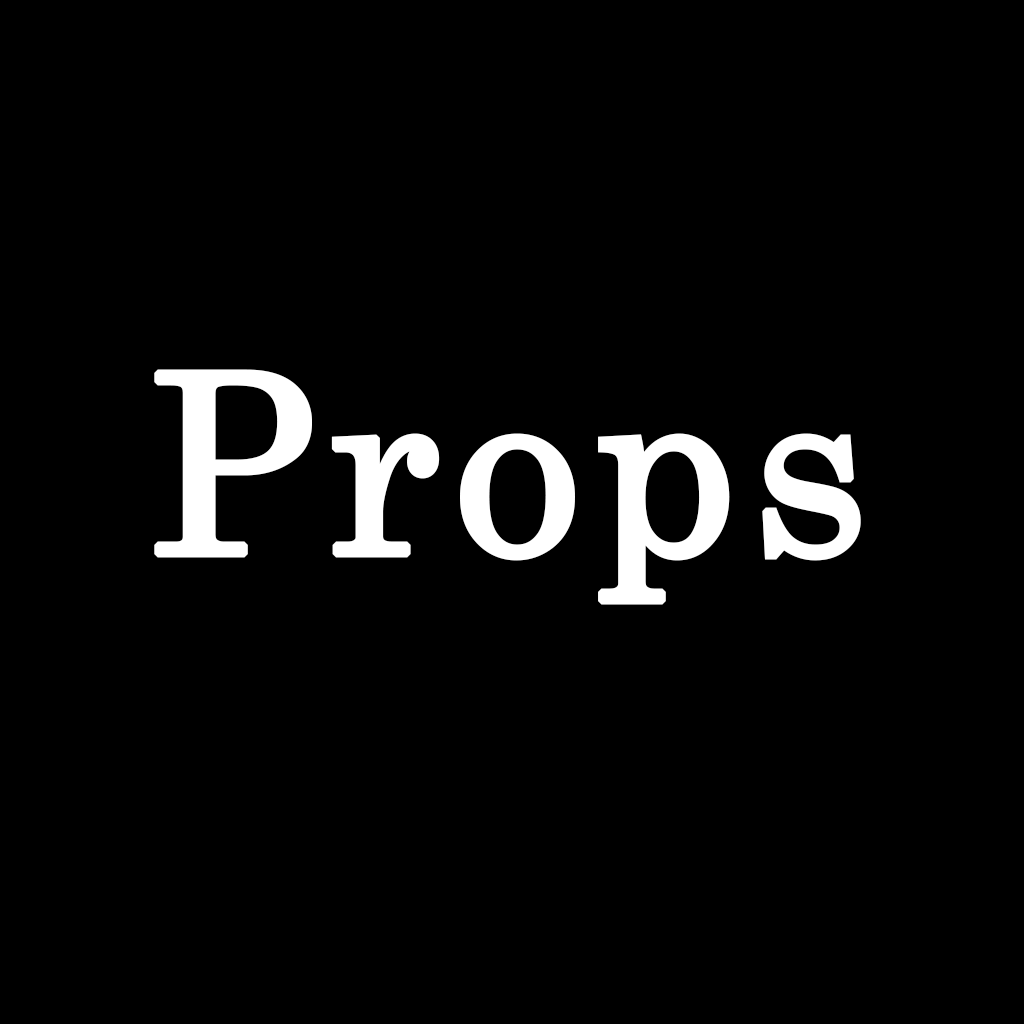
<style>
.page{position:relative;width:1024px;height:1024px;background:#000000}
.page>*{position:absolute;margin:0}
.t1{font:250px "CenturySchoolbook";letter-spacing:0.03em;color:#ffffff;font-weight:bold}
</style>
<div class="page">
<p class="t1" style="left:154px;top:369px;width:707px;height:236px">Props</p>
</div>
